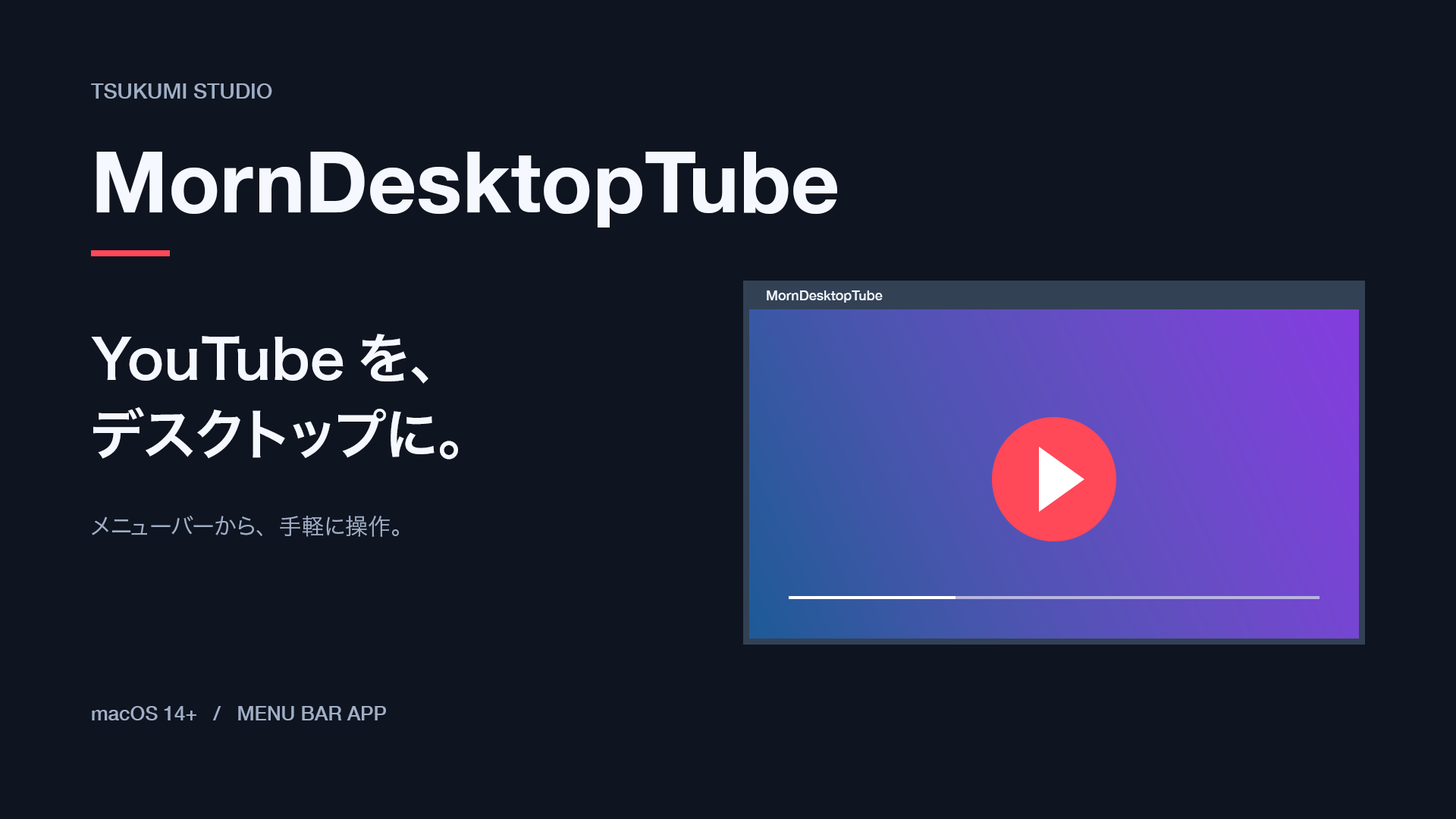
<style>
.page{position:relative;width:1456px;height:819px;background:#0e1420}
.page>*{position:absolute;margin:0}
.t1{font:21.2px "HelveticaNeue-Medium";color:#a0afc6}
.t2{font:84.9px "HelveticaNeue-Bold";color:#f5f8ff}
.t3{font:13.6px "HelveticaNeue-Medium";color:#f0f5ff}
.t4{font:54.6px "HiraginoSans-W6";color:#f5f8ff}
.t5{font:22.7px "HiraginoSans-W3";color:#a0afc6}
.t6{font:19.7px "HelveticaNeue-Medium";color:#a0afc6}
</style>
<div class="page">
<p class="t1" style="left:91px;top:83px;width:181px;height:16px">TSUKUMI STUDIO</p>
<p class="t2" style="left:96px;top:152px;width:742px;height:75px">MornDesktopTube</p>
<p class="t3" style="left:767px;top:290px;width:116px;height:13px">MornDesktopTube</p>
<p class="t4" style="left:91px;top:334px;width:337px;height:50px">YouTubeを、</p>
<p class="t4" style="left:93px;top:407px;width:365px;height:53px">デスクトップに。</p>
<p class="t5" style="left:92px;top:516px;width:307px;height:21px">メニューバーから、手軽に操作。</p>
<p class="t6" style="left:92px;top:706px;width:294px;height:14px">macOS 14+   /   MENU BAR APP</p>
</div>
